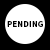
<style>
.page{position:relative;width:50px;height:50px;background:#000000}
.page>*{position:absolute;margin:0}
.t1{font:8px "NotoSansCJKkr-Bold";color:#000000}
</style>
<div class="page">
<p class="t1" style="left:7px;top:21px;width:36px;height:6px">PENDING</p>
</div>
